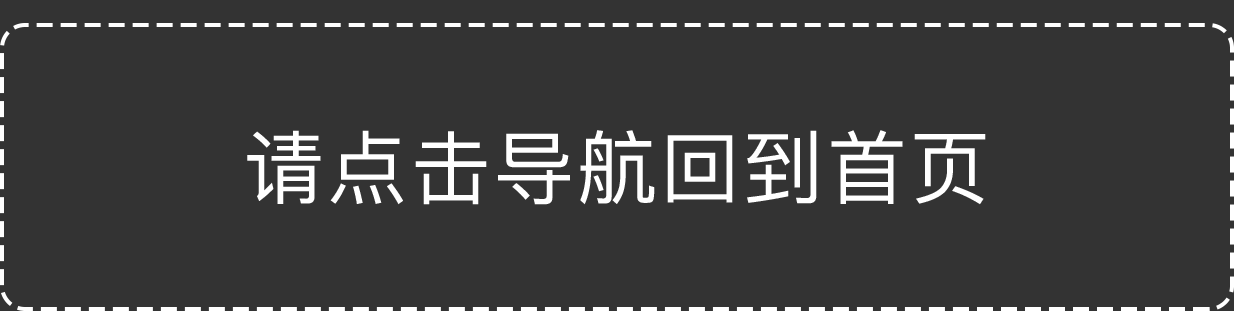
<style>
.page{position:relative;width:1234px;height:311px;background:#333333}
.page>*{position:absolute;margin:0}
.t1{font:80px "PingFang-SC-Medium";letter-spacing:0.04em;color:#ffffff;text-transform:uppercase}
</style>
<div class="page">
<p class="t1" style="left:247px;top:130px;width:739px;height:75px">请点击导航回到首页</p>
</div>
